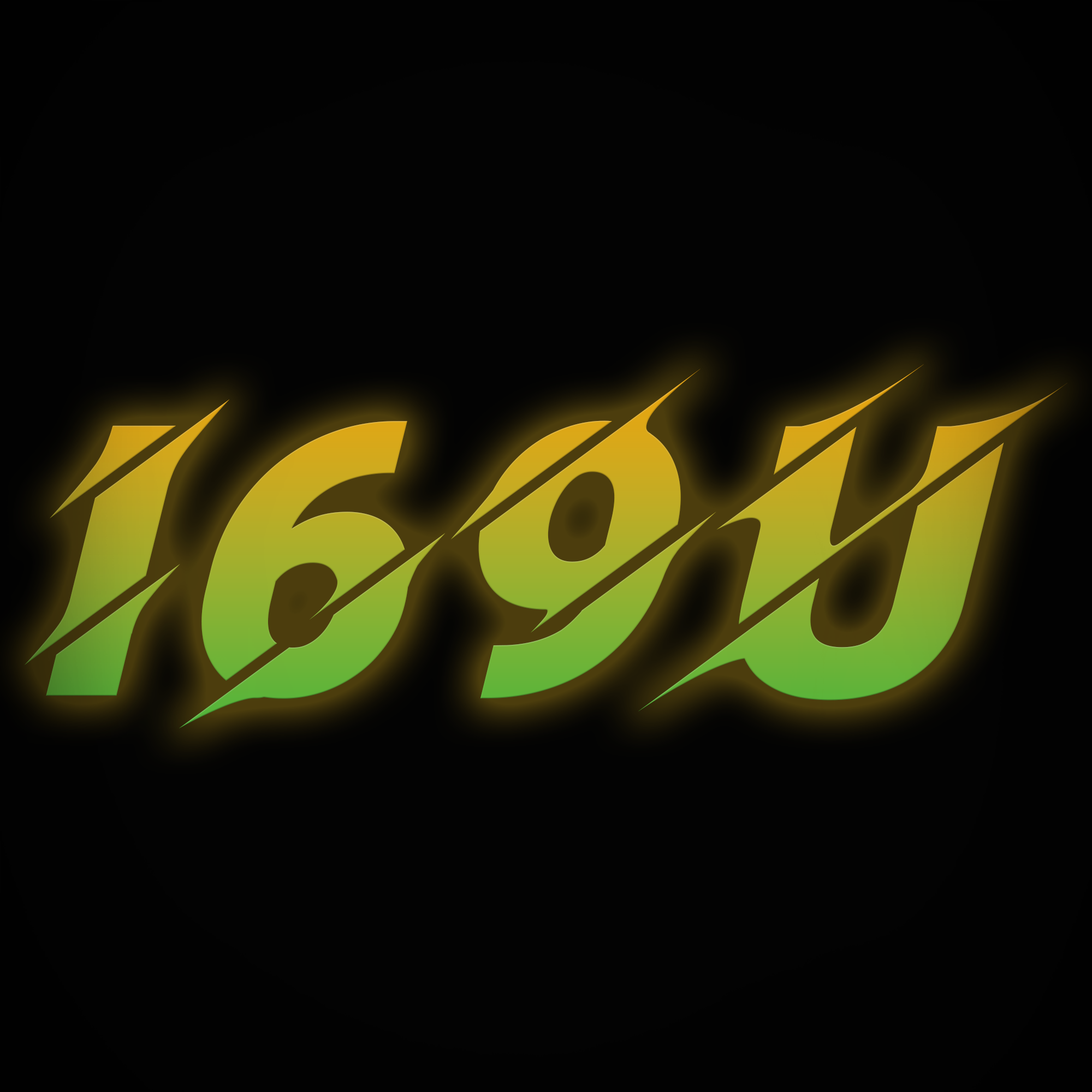
<style>
.page{position:relative;width:1092px;height:1092px;background:#030303}
.page>*{position:absolute;margin:0}
.t1{font:376.5px "Facon"}
</style>
<div class="page">
<p class="t1" style="left:25px;top:364px;width:1042px;height:364px">I69U</p>
</div>
